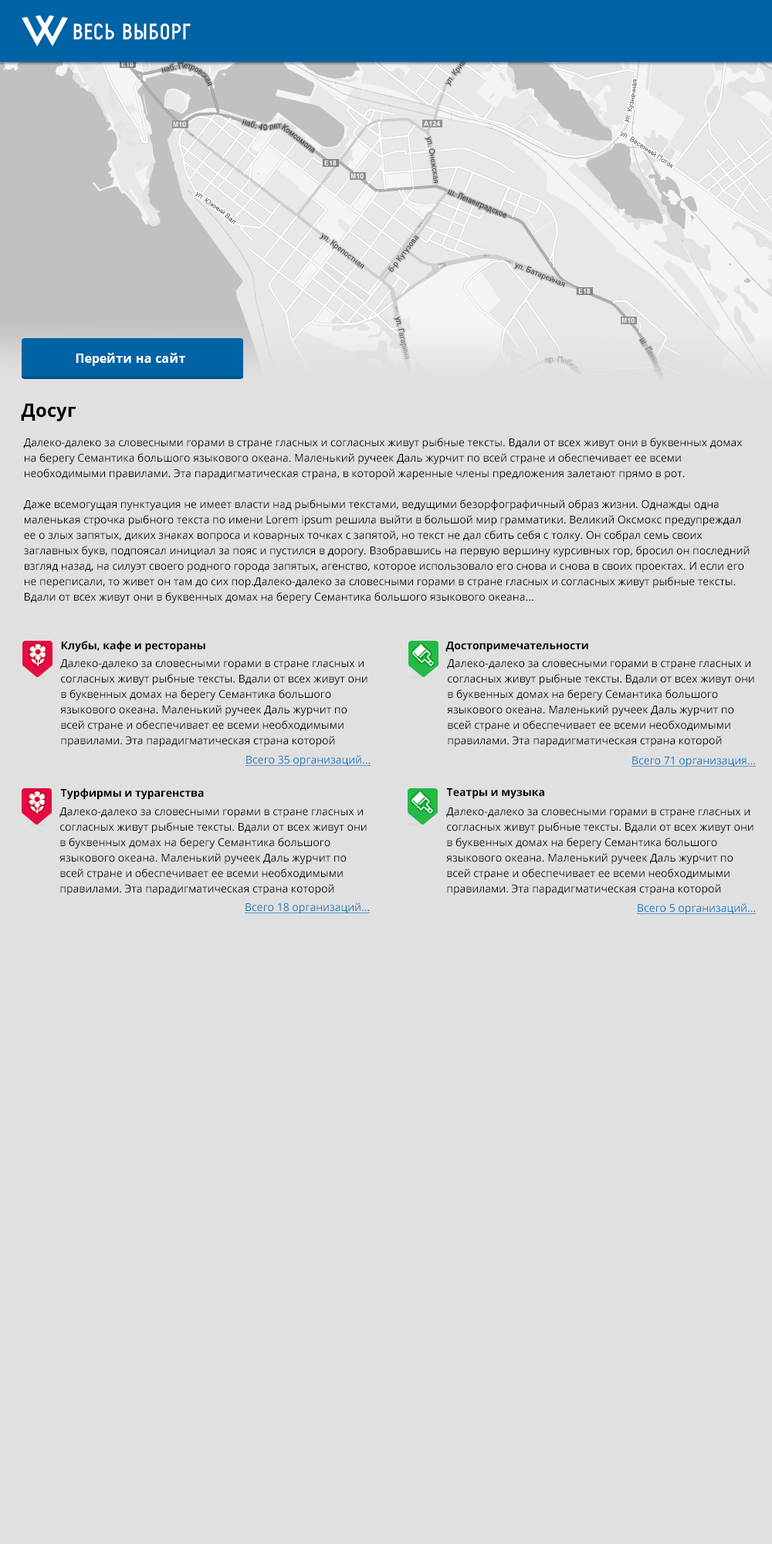
<style>
.page{position:relative;width:772px;height:1544px;background:#e0e0e0}
.page>*{position:absolute;margin:0}
.t1{font:21.6px "ProbelC";letter-spacing:0.075em;color:#ffffff;text-transform:uppercase}
.t2{font:21.6px "ProbelC";letter-spacing:0.1em;color:#ffffff;text-transform:uppercase}
.t3{font:12.4px "OpenSans-Bold";letter-spacing:0.01em;color:#ffffff}
.t4{font:18.5px "OpenSans-Bold";color:#000000}
.t5{font:10.8px/15.4px "OpenSans";color:#000000}
.t6{font:10.8px "OpenSans-Bold";color:#000000}
.t7{font:10.8px "OpenSans";color:#0977c0;text-decoration:underline}
</style>
<div class="page">
<p class="t1" style="left:73px;top:23px;width:118px;height:17px">весь в<span class="t2">ы</span>борг</p>
<p class="t3" style="left:76px;top:353px;width:109px;height:13px">Перейти на сайт</p>
<p class="t4" style="left:21px;top:403px;width:55px;height:19px">Досуг</p>
<p class="t5" style="left:23px;top:438px;width:727px;height:166px">Далеко-далеко за словесными горами в стране гласных и согласных живут рыбные тексты. Вдали от всех живут они в буквенных домах на берегу Семантика большого языкового океана. Маленький ручеек Даль журчит по всей стране и обеспечивает ее всеми необходимыми правилами. Эта парадигматическая страна, в которой жаренные члены предложения залетают прямо в рот. <br><br>Даже всемогущая пунктуация не имеет власти над рыбными текстами, ведущими безорфографичный образ жизни. Однажды одна маленькая строчка рыбного текста по имени Lorem ipsum решила выйти в большой мир грамматики. Великий Оксмокс предупреждал ее о злых запятых, диких знаках вопроса и коварных точках с запятой, но текст не дал сбить себя с толку. Он собрал семь своих заглавных букв, подпоясал инициал за пояс и пустился в дорогу. Взобравшись на первую вершину курсивных гор, бросил он последний взгляд назад, на силуэт своего родного города запятых, агенство, которое использовало его снова и снова в своих проектах. И если его не переписали, то живет он там до сих пор.Далеко-далеко за словесными горами в стране гласных и согласных живут рыбные тексты. Вдали от всех живут они в буквенных домах на берегу Семантика большого языкового океана...</p>
<p class="t6" style="left:61px;top:641px;width:144px;height:11px">Клубы, кафе и рестораны</p>
<p class="t6" style="left:446px;top:642px;width:142px;height:10px">Достопримечательности</p>
<p class="t5" style="left:60px;top:659px;width:308px;height:88px">Далеко-далеко за словесными горами в стране гласных и согласных живут рыбные тексты. Вдали от всех живут они в буквенных домах на берегу Семантика большого языкового океана. Маленький ручеек Даль журчит по всей стране и обеспечивает ее всеми необходимыми правилами. Эта парадигматическая страна которой жаренные члены предложения залетают прямо в ...</p>
<p class="t5" style="left:447px;top:659px;width:307px;height:88px">Далеко-далеко за словесными горами в стране гласных и согласных живут рыбные тексты. Вдали от всех живут они в буквенных домах на берегу Семантика большого языкового океана. Маленький ручеек Даль журчит по всей стране и обеспечивает ее всеми необходимыми правилами. Эта парадигматическая страна которой жаренные члены предложения залетают прямо в ...</p>
<p class="t7" style="left:246px;top:755px;width:125px;height:12px">Всего 35 организаций...</p>
<p class="t7" style="left:632px;top:757px;width:125px;height:11px">Всего 71 организация...</p>
<p class="t6" style="left:60px;top:788px;width:144px;height:12px">Турфирмы и турагенства</p>
<p class="t6" style="left:446px;top:788px;width:98px;height:11px">Театры и музыка</p>
<p class="t5" style="left:59px;top:808px;width:308px;height:88px">Далеко-далеко за словесными горами в стране гласных и согласных живут рыбные тексты. Вдали от всех живут они в буквенных домах на берегу Семантика большого языкового океана. Маленький ручеек Даль журчит по всей стране и обеспечивает ее всеми необходимыми правилами. Эта парадигматическая страна которой жаренные члены предложения залетают прямо в ...</p>
<p class="t5" style="left:446px;top:808px;width:308px;height:88px">Далеко-далеко за словесными горами в стране гласных и согласных живут рыбные тексты. Вдали от всех живут они в буквенных домах на берегу Семантика большого языкового океана. Маленький ручеек Даль журчит по всей стране и обеспечивает ее всеми необходимыми правилами. Эта парадигматическая страна которой жаренные члены предложения залетают прямо в ...</p>
<p class="t7" style="left:245px;top:903px;width:126px;height:11px">Всего 18 организаций...</p>
<p class="t7" style="left:637px;top:903px;width:120px;height:12px">Всего 5 организаций...</p>
</div>
